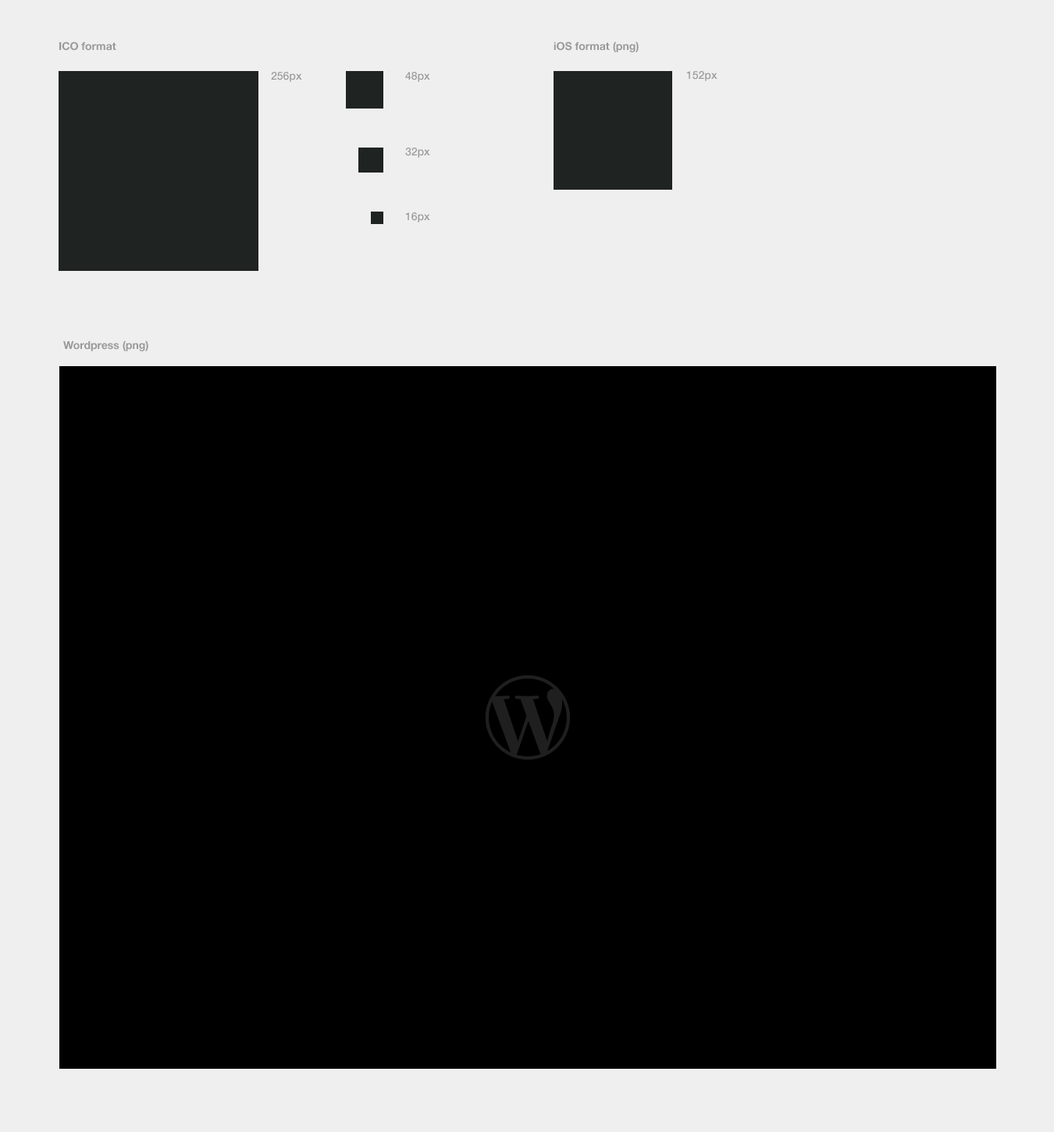
<style>
.page{position:relative;width:1054px;height:1132px;background:#000000}
.page>*{position:absolute;margin:0}
.t1{font:10.9px "HelveticaNeueLTStd-Bd";color:#999999}
.t2{font:10.9px "HelveticaNeueLTStd-Md";color:#999999}
.t3{font:10.9px/239.6px "HelveticaNeueLTStd-Md";color:#999999}
.t4{font:10.9px/75.7px "HelveticaNeueLTStd-Md";color:#999999}
.t5{font:10.9px/64.8px "HelveticaNeueLTStd-Md";color:#999999}
</style>
<div class="page">
<p class="t1" style="left:59px;top:41px;width:57px;height:10px">ICO format</p>
<p class="t1" style="left:553px;top:41px;width:85px;height:11px">iOS format (png)</p>
<p class="t2" style="left:271px;top:72px;width:31px;height:10px">256px</p>
<p class="t3" style="left:405px;top:72px;width:25px;height:150px">48px<br><span class="t4">32px<br></span><span class="t5">16px</span></p>
<p class="t2" style="left:686px;top:71px;width:31px;height:10px">152px</p>
<p class="t1" style="left:63px;top:340px;width:85px;height:11px">Wordpress (png)</p>
</div>
